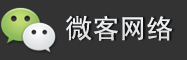
<style>
.page{position:relative;width:187px;height:60px;background:#333333}
.page>*{position:absolute;margin:0}
.t1{font:27px "SimHei";color:#f0f2f5}
</style>
<div class="page">
<p class="t1" style="left:66px;top:15px;width:107px;height:26px">微客网络</p>
</div>
